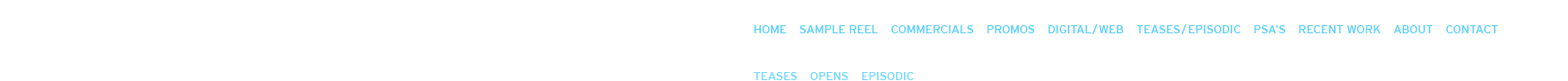
<style>
.page{position:relative;width:1568px;height:81px;background:#ffffff}
.page>*{position:absolute;margin:0}
.t1{font:11.6px "Interstate-Regular";color:#58d0ff}
.t2{font:11.6px "Interstate-Regular";color:#6fd8ff}
</style>
<div class="page">
<p class="t1" style="left:754px;top:24px;width:744px;height:10px">HOME    SAMPLE REEL    COMMERCIALS    PROMOS    DIGITAL/WEB    TEASES/EPISODIC    PSA’S    RECENT WORK    ABOUT    CONTACT</p>
<p class="t2" style="left:754px;top:72px;width:160px;height:8px">TEASES    OPENS    EPISODIC</p>
</div>
